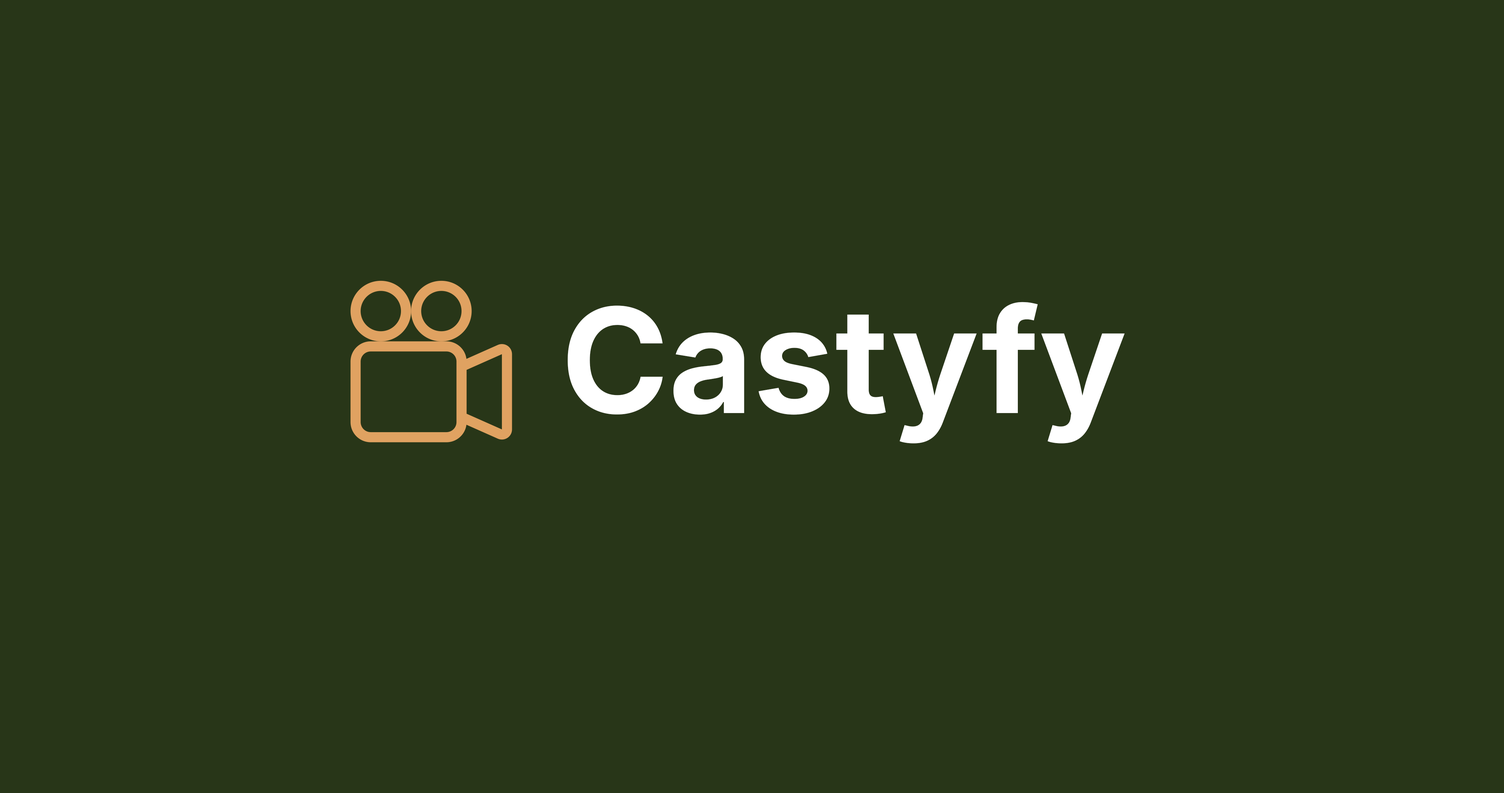
<style>
.page{position:relative;width:1504px;height:793px;background:#283618}
.page>*{position:absolute;margin:0}
.t1{font:145.6px "Inter-Bold";color:#ffffff}
</style>
<div class="page">
<p class="t1" style="left:568px;top:302px;width:556px;height:141px">Castyfy</p>
</div>
